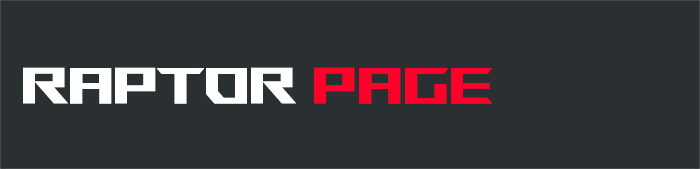
<style>
.page{position:relative;width:700px;height:169px;background:#2a2f31}
.page>*{position:absolute;margin:0}
.t1{font:50px "ROGFonts-Regular";color:#ffffff;font-weight:bold}
.t2{font:50px "ROGFonts-Regular";color:#ff002a;font-weight:bold}
</style>
<div class="page">
<p class="t1" style="left:23px;top:67px;width:469px;height:37px">Raptor <span class="t2">Page</span></p>
</div>
